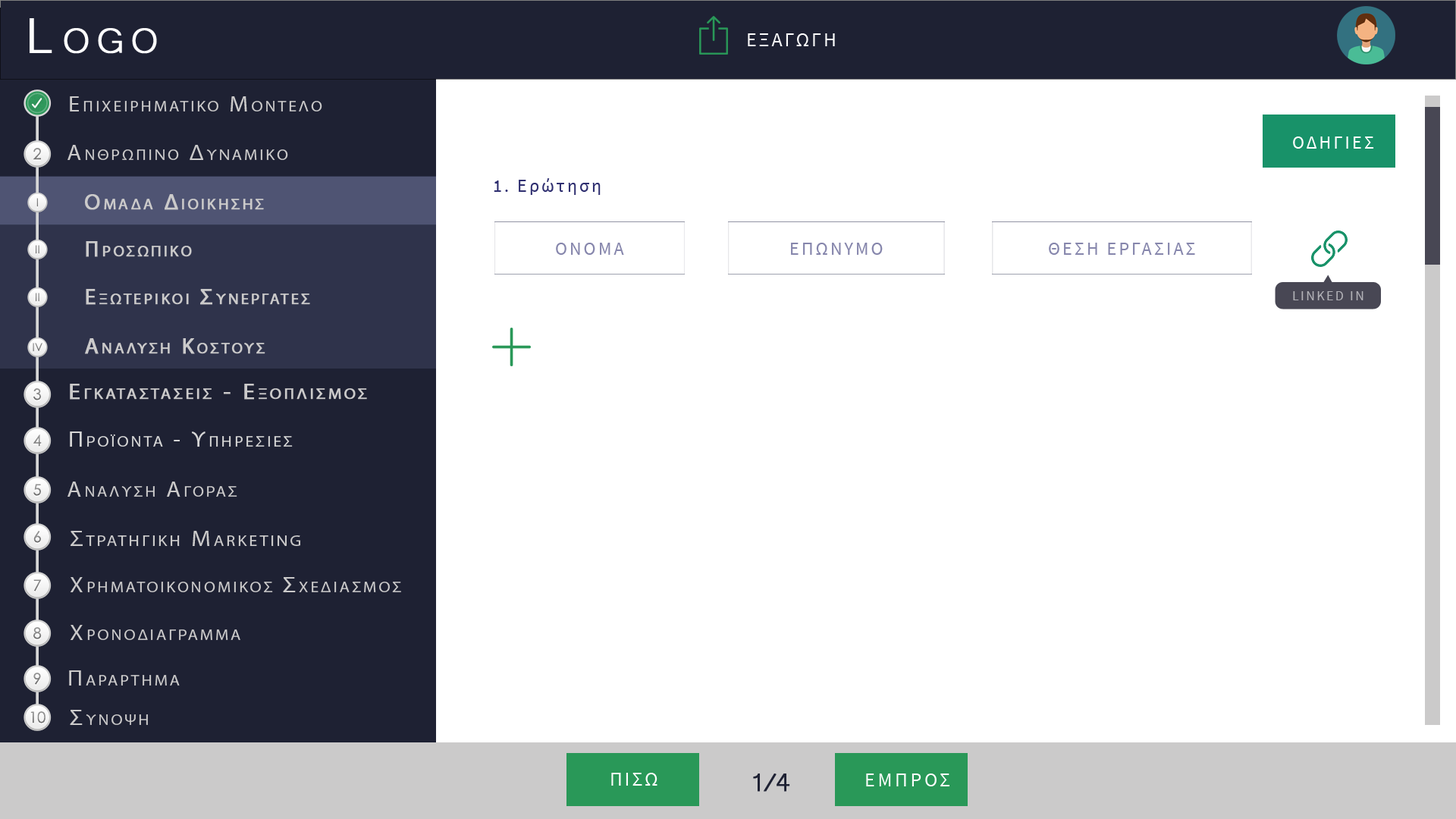
<style>
.page{position:relative;width:1456px;height:819px;background:#ffffff}
.page>*{position:absolute;margin:0}
.t1{font:63.7px "Microsoft-Yi-Baiti";letter-spacing:0.13em;color:#ffffff;font-variant:small-caps;font-weight:bold}
.t2{font:20px "SourceSansPro-Regular";letter-spacing:0.1em;color:#fefefe;text-transform:uppercase}
.t3{font:21.7px "MyriadPro-Regular";letter-spacing:0.13em;color:#cbcaca;font-variant:small-caps;scale:1.09 1}
.t4{font:23.4px "Microsoft-Yi-Baiti";letter-spacing:0.13em;color:#cbcaca;font-variant:small-caps;font-weight:bold}
.t5{font:18.2px "SourceSansPro-Regular";letter-spacing:0.13em;color:#ffffff;text-transform:uppercase}
.t6{font:15.3px "CenturyGothic";color:#7d7d7d}
.t7{font:18.2px "SourceSansPro-Regular";letter-spacing:0.13em;color:#2f2f70}
.t8{font:18.2px "SourceSansPro-Regular";letter-spacing:0.13em;color:#2f2f70;text-transform:uppercase}
.t9{font:11.2px "CenturyGothic";color:#808080}
.t10{font:22.3px "MyriadPro-Regular";letter-spacing:0.13em;color:#cbcaca;font-variant:small-caps;font-weight:bold}
.t11{font:11.2px "CenturyGothic";color:#828282}
.t12{font:18.2px "SourceSansPro-Regular";letter-spacing:0.13em;color:#8686ac;text-transform:uppercase}
.t13{font:13.7px "SourceSansPro-Regular";letter-spacing:0.13em;color:#b2b2b7;text-transform:uppercase}
.t14{font:11.2px "CenturyGothic";color:#818181}
.t15{font:15.3px "CenturyGothic";color:#8b8b8b}
.t16{font:21.7px/91px "MyriadPro-Regular";letter-spacing:0.13em;color:#cbcaca;font-variant:small-caps;font-weight:bold;scale:1.09 1}
.t17{font:23.4px/91px "Microsoft-Yi-Baiti";letter-spacing:0.13em;color:#cbcaca;font-variant:small-caps;font-weight:bold}
.t18{font:15.3px "CenturyGothic";color:#878787}
.t19{font:21.7px "MyriadPro-Regular";letter-spacing:0.13em;color:#d6d6d6;font-variant:small-caps;scale:1.09 1}
.t20{font:23.4px "Microsoft-Yi-Baiti";letter-spacing:0.13em;color:#d6d6d6;font-variant:small-caps;font-weight:bold}
.t21{font:15.3px "CenturyGothic";color:#898989}
.t22{font:15.3px "CenturyGothic";color:#838383}
.t23{font:22.2px "MyriadPro-Regular";letter-spacing:0.13em;color:#cbcaca;font-variant:small-caps;scale:1.09 1}
.t24{font:25.5px "Microsoft-Yi-Baiti";letter-spacing:0.13em;color:#cbcaca;font-variant:small-caps;font-weight:bold}
.t25{font:15.3px "CenturyGothic";color:#888888}
.t26{font:23.7px "Microsoft-Yi-Baiti";letter-spacing:0.13em;color:#cbcaca;font-variant:small-caps;scale:1.09 1}
.t27{font:32.8px "Microsoft-Yi-Baiti";letter-spacing:-0.1em;color:#1e2133;font-weight:bold}
.t28{font:20px "SourceSansPro-Regular";letter-spacing:0.13em;color:#fefefe;text-transform:uppercase}
</style>
<div class="page">
<p class="t1" style="left:30px;top:18px;width:127px;height:36px">Logo</p>
<p class="t2" style="left:748px;top:33px;width:87px;height:13px">εξαγωγη</p>
<p class="t3" style="left:70px;top:96px;width:252px;height:15px"><span class="t4">   </span>Επιχειρηματικο Μοντελο</p>
<p class="t5" style="left:1293px;top:136px;width:81px;height:13px">Οδηγιεσ</p>
<p class="t6" style="left:33px;top:148px;width:8px;height:12px">2</p>
<p class="t3" style="left:67px;top:145px;width:221px;height:15px"><span class="t4">   </span>Ανθρωπινο Δυναμικο</p>
<p class="t7" style="left:494px;top:178px;width:107px;height:17px"><span class="t8">1. </span>Ερώτηση</p>
<p class="t9" style="left:36px;top:198px;width:2px;height:9px">I</p>
<p class="t10" style="left:85px;top:194px;width:179px;height:16px">Ομαδα Διοικησησ</p>
<p class="t11" style="left:36px;top:245px;width:3px;height:9px">II</p>
<p class="t10" style="left:86px;top:241px;width:106px;height:16px">Προσωπικο</p>
<p class="t12" style="left:556px;top:243px;width:68px;height:12px">ONOMA</p>
<p class="t12" style="left:791px;top:243px;width:92px;height:12px">ΕΠΩΝΥΜΟ</p>
<p class="t12" style="left:1049px;top:243px;width:146px;height:12px">θεση εργασιασ</p>
<p class="t11" style="left:36px;top:293px;width:3px;height:9px">II</p>
<p class="t10" style="left:86px;top:289px;width:224px;height:16px">Εξωτερικοι Συνεργατεσ</p>
<p class="t13" style="left:1293px;top:291px;width:70px;height:9px">Linked in</p>
<p class="t10" style="left:85px;top:338px;width:180px;height:16px">Αναλυση Κοστουσ</p>
<p class="t14" style="left:33px;top:343px;width:9px;height:9px">IV</p>
<p class="t15" style="left:33px;top:388px;width:8px;height:12px">3</p>
<p class="t16" style="left:70px;top:384px;width:297px;height:16px"><span class="t17">   </span>Εγκαταστασεισ - Εξοπλισμοσ<br><br><span class="t17">Equipment</span></p>
<p class="t18" style="left:33px;top:435px;width:9px;height:12px">4</p>
<p class="t19" style="left:70px;top:431px;width:223px;height:16px"><span class="t20">   </span>Προϊοντα - Υπηρεσιεσ</p>
<p class="t21" style="left:33px;top:484px;width:8px;height:12px">5</p>
<p class="t3" style="left:67px;top:482px;width:170px;height:15px"><span class="t4">   </span>Αναλυση Αγορασ</p>
<p class="t22" style="left:33px;top:531px;width:8px;height:12px">6</p>
<p class="t23" style="left:71px;top:531px;width:229px;height:15px"><span class="t24">   </span>Στρατηγικη Marketing</p>
<p class="t25" style="left:33px;top:579px;width:9px;height:12px">7</p>
<p class="t3" style="left:70px;top:577px;width:331px;height:15px"><span class="t24">   </span>Χρηματοικονομικοσ Σχεδιασμοσ</p>
<p class="t15" style="left:33px;top:627px;width:9px;height:12px">8</p>
<p class="t3" style="left:70px;top:625px;width:170px;height:15px"><span class="t24">   </span>Χρονοδιαγραμμα</p>
<p class="t22" style="left:33px;top:673px;width:8px;height:12px">9</p>
<p class="t3" style="left:69px;top:670px;width:111px;height:16px"><span class="t26">   </span>Παραρτημα</p>
<p class="t18" style="left:30px;top:711px;width:15px;height:12px">10</p>
<p class="t3" style="left:70px;top:710px;width:78px;height:15px"><span class="t26">   </span>Συνοψη</p>
<p class="t2" style="left:611px;top:773px;width:46px;height:13px">Πισω</p>
<p class="t27" style="left:753px;top:773px;width:37px;height:19px">1/4</p>
<p class="t28" style="left:866px;top:773px;width:83px;height:13px">εμπροσ</p>
</div>
